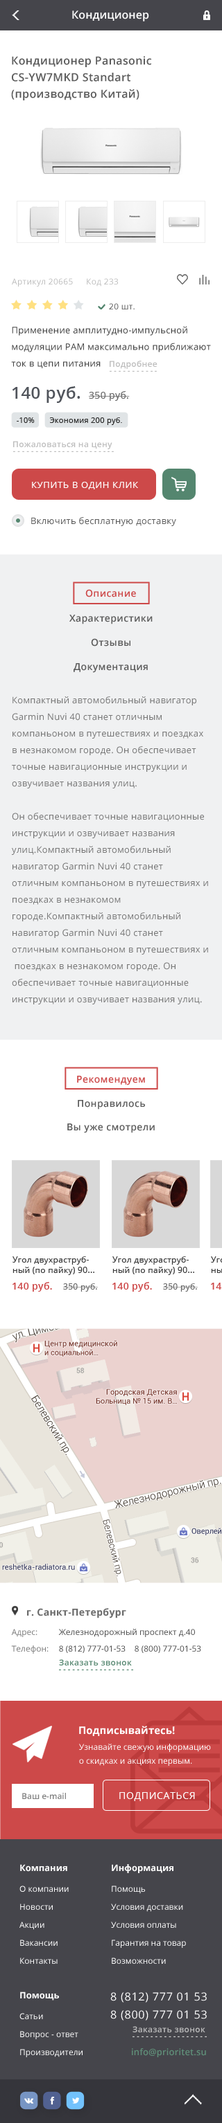
<style>
.page{position:relative;width:222px;height:2123px;background:#ffffff}
.page>*{position:absolute;margin:0}
.t1{font:11.1px "OpenSans-Semibold";color:#ffffff}
.t2{font:11.1px/16.6px "OpenSans-Semibold";letter-spacing:0.025em;color:#5c5c5c}
.t3{font:8.3px "OpenSans";letter-spacing:0.025em;color:#bdbdbd}
.t4{font:8.3px "OpenSans";letter-spacing:0.025em;color:#5c5c5c}
.t5{font:9px/16.6px "OpenSans";letter-spacing:0.025em;color:#414141}
.t6{font:8.3px "OpenSans-Semibold";letter-spacing:0.025em;color:#bdbdbd}
.t7{font:16.6px "OpenSans-Semibold";letter-spacing:0.025em;color:#50545b}
.t8{font:9.7px "OpenSans";letter-spacing:0.025em;color:#696969}
.t9{font:7.6px "OpenSans";letter-spacing:0.025em;color:#282828}
.t10{font:9px "OpenSans";letter-spacing:0.05em;color:#ffffff;text-transform:uppercase}
.t11{font:9px "OpenSans";letter-spacing:0.025em;color:#5c5c5c}
.t12{font:9.7px "OpenSans-Semibold";letter-spacing:0.025em;color:#cd4949}
.t13{font:9.7px "OpenSans-Semibold";letter-spacing:0.025em;color:#5c5c5c}
.t14{font:9px/16.6px "OpenSans";letter-spacing:0.025em;color:#787878}
.t15{font:8.3px "OpenSans";letter-spacing:0.025em;color:#3a3a3a}
.t16{font:8.3px "OpenSans";letter-spacing:0.025em;color:#696969}
.t17{font:9.7px "OpenSans-Bold";letter-spacing:0.025em;color:#6c6c6c}
.t18{font:8.3px/16.6px "OpenSans";color:#797979}
.t19{font:8.3px/16.6px "OpenSans";color:#4b4b4b}
.t20{font:8.3px/13.8px "OpenSans";color:#4b4b4b}
.t21{font:8.3px "OpenSans-Semibold";letter-spacing:0.025em;color:#54866f}
.t22{font:10.4px "OpenSans-Bold";color:#ffffff}
.t23{font:8.3px/13.8px "OpenSans";color:#ffffff}
.t24{font:8.3px "OpenSans-Semibold";color:#818181}
.t25{font:9.7px "OpenSans";letter-spacing:0.05em;color:#ffffff;text-transform:uppercase}
.t26{font:8.3px/18px "OpenSans";color:#ffffff}
.t27{font:9px/16.6px "OpenSans-Bold";color:#ffffff}
.t28{font:8.3px/20.8px "OpenSans";color:#ffffff}
.t29{font:11.1px/18px "OpenSans";letter-spacing:0.05em;color:#ffffff}
.t30{font:8.3px "OpenSans-Semibold";letter-spacing:0.025em;color:#bfbfbf}
.t31{font:9px "OpenSans-Semibold";letter-spacing:0.01em;color:#5f8e78}
</style>
<div class="page">
<p class="t1" style="left:72px;top:10px;width:77px;height:11px">Кондиционер</p>
<p class="t2" style="left:11px;top:56px;width:141px;height:44px">Кондиционер Panasonic<br>CS-YW7MKD Standart (производство Китай)</p>
<p class="t3" style="left:12px;top:278px;width:61px;height:9px">Артикул 20665</p>
<p class="t3" style="left:87px;top:278px;width:31px;height:9px">Код 233</p>
<p class="t4" style="left:109px;top:303px;width:25px;height:6px">20 шт.</p>
<p class="t5" style="left:11px;top:326px;width:199px;height:42px">Применение амплитудно-импульсной модуляции PAM максимально приближают ток в цепи питания</p>
<p class="t6" style="left:109px;top:361px;width:48px;height:8px">Подробнее</p>
<p class="t7" style="left:12px;top:386px;width:68px;height:17px">140 руб.</p>
<p class="t8" style="left:89px;top:391px;width:40px;height:10px">350 руб.</p>
<p class="t9" style="left:17px;top:417px;width:18px;height:6px">-10%</p>
<p class="t9" style="left:50px;top:417px;width:72px;height:8px">Экономия 200 руб.</p>
<p class="t6" style="left:13px;top:441px;width:99px;height:8px">Пожаловаться на цену</p>
<p class="t10" style="left:32px;top:482px;width:106px;height:7px">купить в один клик</p>
<p class="t11" style="left:31px;top:517px;width:145px;height:9px">Включить бесплатную доставку</p>
<p class="t12" style="left:85px;top:589px;width:51px;height:8px">Описание</p>
<p class="t13" style="left:69px;top:615px;width:83px;height:9px">Характеристики</p>
<p class="t13" style="left:91px;top:638px;width:39px;height:9px">Отзывы</p>
<p class="t13" style="left:73px;top:663px;width:74px;height:10px">Документация</p>
<p class="t14" style="left:12px;top:696px;width:196px;height:309px">Компактный автомобильный навигатор Garmin Nuvi 40 станет отличным компаньоном в путешествиях и поездках в незнакомом городе. Он обеспечивает точные навигационные инструкции и озвучивает названия улиц.<br><br>Он обеспечивает точные навигационные инструкции и озвучивает названия улиц.Компактный автомобильный навигатор Garmin Nuvi 40 станет отличным компаньоном в путешествиях и поездках в незнакомом городе.Компактный автомобильный навигатор Garmin Nuvi 40 станет отличным компаньоном в путешествиях и<br> поездках в незнакомом городе. Он обеспечивает точные навигационные инструкции и озвучивает названия улиц.</p>
<p class="t12" style="left:77px;top:1076px;width:68px;height:10px">Рекомендуем</p>
<p class="t13" style="left:78px;top:1100px;width:67px;height:10px">Понравилось</p>
<p class="t13" style="left:67px;top:1124px;width:87px;height:9px">Вы уже смотрели</p>
<p class="t15" style="left:12px;top:1257px;width:82px;height:18px">Угол двухраструбный (по пайку) 90...</p>
<p class="t15" style="left:112px;top:1257px;width:82px;height:18px">Угол двухраструбный (по пайку) 90...</p>
<p class="t15" style="left:210px;top:1257px;width:12px;height:16px">Угол двухраструбный</p>
<p class="t12" style="left:12px;top:1282px;width:40px;height:10px">140 руб.</p>
<p class="t16" style="left:63px;top:1284px;width:35px;height:8px">350 руб.</p>
<p class="t12" style="left:112px;top:1282px;width:40px;height:10px">140 руб.</p>
<p class="t16" style="left:163px;top:1284px;width:34px;height:8px">350 руб.</p>
<p class="t12" style="left:210px;top:1283px;width:12px;height:7px">140 руб.</p>
<p class="t17" style="left:27px;top:1608px;width:99px;height:11px">г. Санкт-Петербург</p>
<p class="t18" style="left:11px;top:1629px;width:37px;height:25px">Адрес:<br>Телефон:</p>
<p class="t19" style="left:58px;top:1629px;width:143px;height:24px">Железнодорожный проспект д.40  <br>8 (812) 777-01-53    <span class="t20">8 (800) 777-01-53</span></p>
<p class="t21" style="left:59px;top:1659px;width:73px;height:7px">Заказать звонок</p>
<p class="t22" style="left:79px;top:1726px;width:95px;height:10px">Подписывайтесь!</p>
<p class="t23" style="left:79px;top:1744px;width:131px;height:22px">Узнавайте свежую информацию <br>о скидках и акциях первым.</p>
<p class="t24" style="left:22px;top:1793px;width:44px;height:6px">Ваш e-mail</p>
<p class="t25" style="left:119px;top:1792px;width:76px;height:9px">подписаться</p>
<p class="t26" style="left:19px;top:1864px;width:50px;height:100px"><span class="t27">Компания<br></span><span class="t28">О компании<br></span>Новости<br>Акции<br>Вакансии<br>Контакты</p>
<p class="t26" style="left:111px;top:1864px;width:75px;height:100px"><span class="t27">Информация<br></span><span class="t28">Помощь<br></span>Условия доставки<br>Условия оплаты<br>Гарантия на товар<br>Возможности</p>
<p class="t26" style="left:19px;top:1992px;width:63px;height:66px"><span class="t27">Помощь<br></span><span class="t28">Сатьи<br></span>Вопрос - ответ<br>Производители</p>
<p class="t29" style="left:110px;top:1992px;width:96px;height:29px">8 (812) 777 01 53<br>8 (800) 777 01 53</p>
<p class="t30" style="left:132px;top:2026px;width:73px;height:7px">Заказать звонок</p>
<p class="t31" style="left:132px;top:2049px;width:74px;height:9px">info@prioritet.su</p>
</div>
